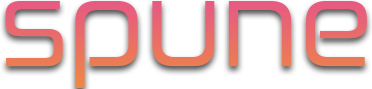
<style>
.page{position:relative;width:372px;height:89px;background:#ffffff}
.page>*{position:absolute;margin:0}
.t1{font:125px "ZektonRg-Regular";color:#e96a6b}
</style>
<div class="page">
<p class="t1" style="left:5px;top:1px;width:362px;height:87px">spune</p>
</div>
